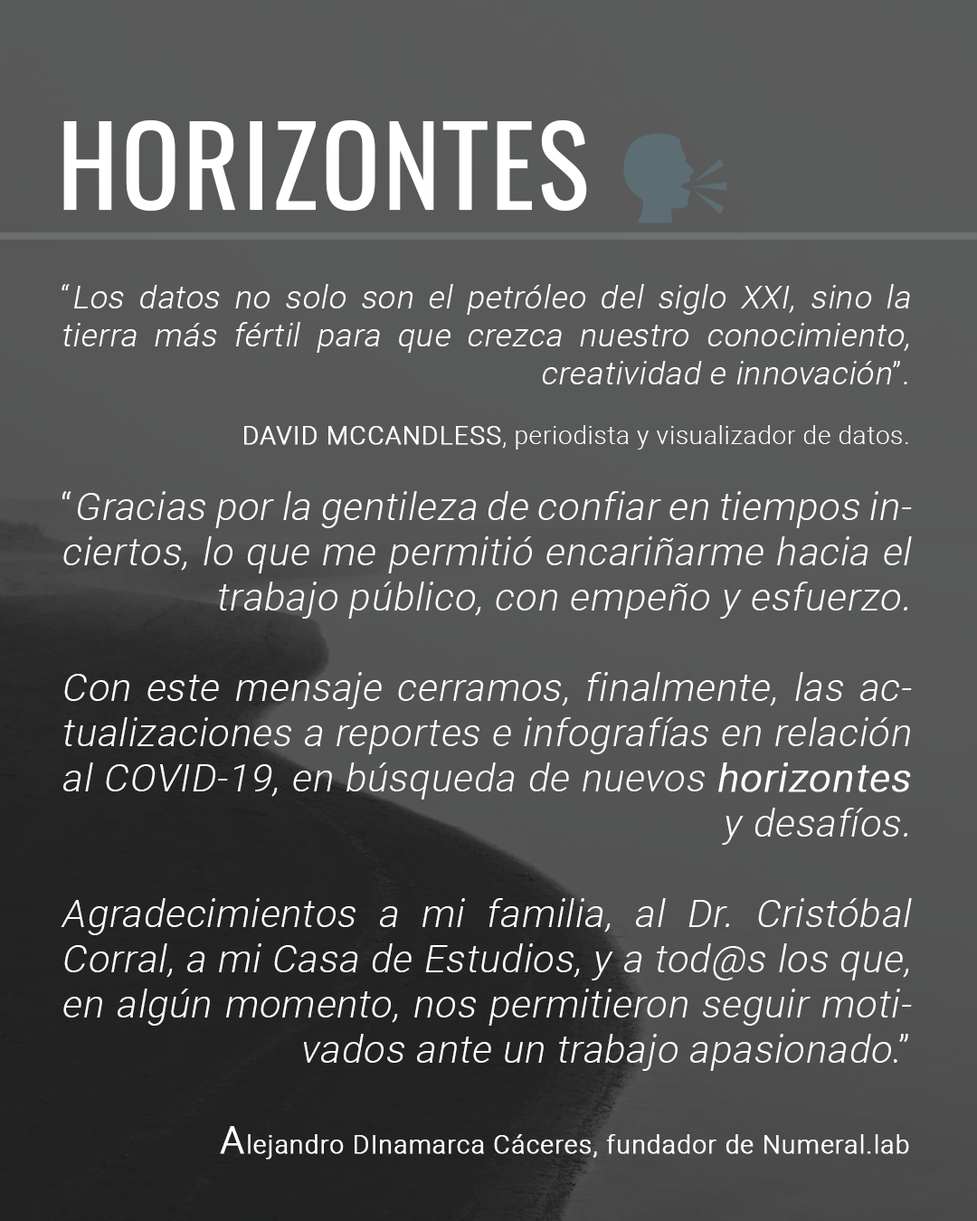
<style>
.page{position:relative;width:977px;height:1221px}
.page>*{position:absolute;margin:0}
.t1{font:109.7px "Oswald-Regular";letter-spacing:0.025em;color:#ffffff}
.t2{font:109.7px "EmojiOneColor";letter-spacing:0.025em;color:#ffffff}
.t3{font:37.7px "Roboto-Light";letter-spacing:0.025em;color:#ffffff;font-style:italic}
.t4{font:31.4px "Roboto-Light";letter-spacing:0.025em;color:#ffffff}
.t5{font:31.4px "Roboto-Light";letter-spacing:0.025em;color:#ffffff;font-style:italic}
.t6{font:25.1px "Roboto-Light";letter-spacing:0.025em;color:#ffffff;font-weight:bold}
.t7{font:25.1px "Roboto-Light";letter-spacing:0.025em;color:#ffffff}
.t8{font:37.7px "Roboto-Light";letter-spacing:0.025em;color:#ffffff}
.t9{font:37.7px "Roboto-Light";letter-spacing:0.025em;color:#ffffff;font-weight:bold;font-style:italic}
.t10{font:37.7px "Roboto-Light";letter-spacing:0.025em;color:#ffffff;font-weight:bold}
</style>
<div class="page">
<p class="t1" style="left:63px;top:120px;width:664px;height:103px">HORIZONTES <span class="t2">🗣</span></p>
<p class="t3" style="left:61px;top:284px;width:851px;height:875px;text-align:justify"><span class="t4">“</span><span class="t5">Los datos no solo son el petróleo del siglo XXI, sino la tierra más fértil para que crezca nuestro conocimiento, creatividad e innovación</span><span class="t4">”.<br></span><span class="t6"><br>DAVID MCCANDLESS</span><span class="t7">, periodista y visualizador de datos.<br><br></span><span class="t8">“</span>Gracias por la gentileza de confiar en tiempos inciertos, lo que me permitió encariñarme hacia el trabajo público, con empeño y esfuerzo.<br><br>Con este mensaje cerramos, finalmente, las actualizaciones a reportes e infografías en relación al COVID-19, en búsqueda de nuevos <span class="t9">horizontes</span> y desafíos.<br><br>Agradecimientos a mi familia, al Dr. Cristóbal Corral, a mi Casa de Estudios, y a tod@s los que, en algún momento, nos permitieron seguir motivados ante un trabajo apasionado<span class="t8">.”<br></span><span class="t10"><br>A</span><span class="t6">lejandro DInamarca Cáceres, fundador de Numeral.lab</span></p>
</div>
